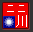
<style>
.page{position:relative;width:33px;height:32px;background:#f20000}
.page>*{position:absolute;margin:0}
.t1{font:10.4px "SimSun";color:#ffffff}
.t2{font:11.7px "SimSun";color:#ffffff}
</style>
<div class="page">
<p class="t1" style="left:7px;top:5px;width:18px;height:7px">二二</p>
<p class="t2" style="left:16px;top:15px;width:11px;height:12px">川</p>
</div>
